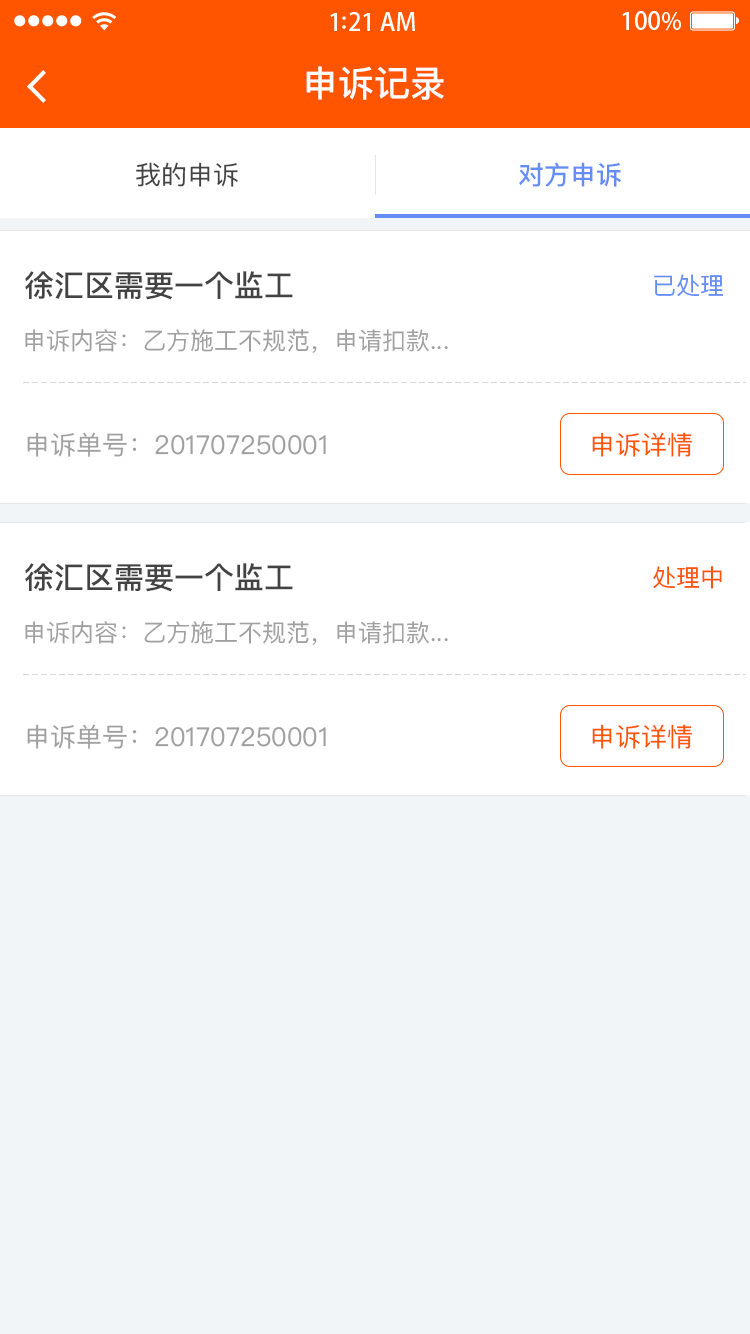
<style>
.page{position:relative;width:750px;height:1334px;background:#ffffff}
.page>*{position:absolute;margin:0}
.t1{font:36px "PingFangSC-Medium";color:#ffffff}
.t2{font:26px "PingFangSC-Regular";color:#434343}
.t3{font:26px "PingFangSC-Medium";color:#648df6}
.t4{font:30px "PingFangSC-Medium";color:#434343}
.t5{font:24px "PingFangSC-Regular";color:#648df6}
.t6{font:24px "PingFangSC-Regular";color:#a0a0a0}
.t7{font:26px "PingFangSC-Regular";color:#a0a0a0}
.t8{font:26px "PingFangSC-Regular";color:#ff5400}
.t9{font:24px "PingFangSC-Regular";color:#ff5400}
</style>
<div class="page">
<p class="t1" style="left:306px;top:66px;width:138px;height:34px">申诉记录</p>
<p class="t2" style="left:136px;top:162px;width:102px;height:25px">我的申诉</p>
<p class="t3" style="left:519px;top:162px;width:102px;height:25px">对方申诉</p>
<p class="t4" style="left:25px;top:271px;width:268px;height:29px">徐汇区需要一个监工</p>
<p class="t5" style="left:654px;top:274px;width:69px;height:23px">已处理</p>
<p class="t6" style="left:25px;top:329px;width:423px;height:24px">申诉内容：乙方施工不规范，申请扣款...</p>
<p class="t7" style="left:27px;top:432px;width:299px;height:25px">申诉单号：201707250001</p>
<p class="t8" style="left:592px;top:432px;width:100px;height:25px">申诉详情</p>
<p class="t4" style="left:25px;top:563px;width:268px;height:29px">徐汇区需要一个监工</p>
<p class="t9" style="left:653px;top:566px;width:69px;height:23px">处理中</p>
<p class="t6" style="left:25px;top:621px;width:423px;height:24px">申诉内容：乙方施工不规范，申请扣款...</p>
<p class="t7" style="left:27px;top:724px;width:299px;height:25px">申诉单号：201707250001</p>
<p class="t8" style="left:592px;top:724px;width:100px;height:25px">申诉详情</p>
</div>
